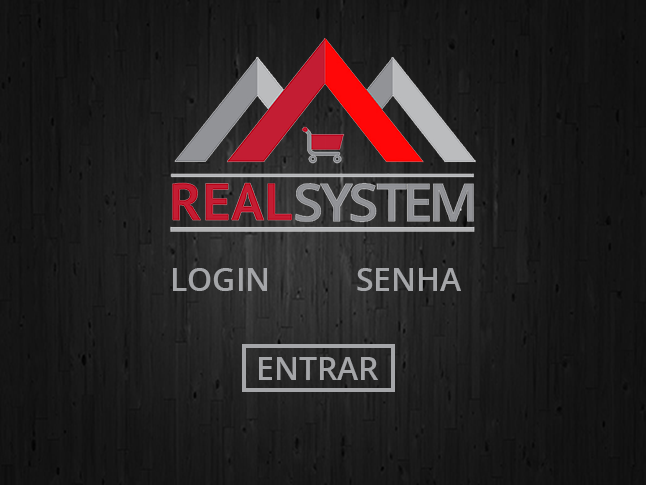
<style>
.page{position:relative;width:646px;height:485px}
.page>*{position:absolute;margin:0}
.t1{font:32px "OpenSans-Semibold";color:#a5a6a9}
</style>
<div class="page">
<p class="t1" style="left:173px;top:268px;width:94px;height:23px">LOGIN</p>
<p class="t1" style="left:357px;top:268px;width:104px;height:23px">SENHA</p>
<p class="t1" style="left:259px;top:357px;width:119px;height:23px">ENTRAR</p>
</div>
